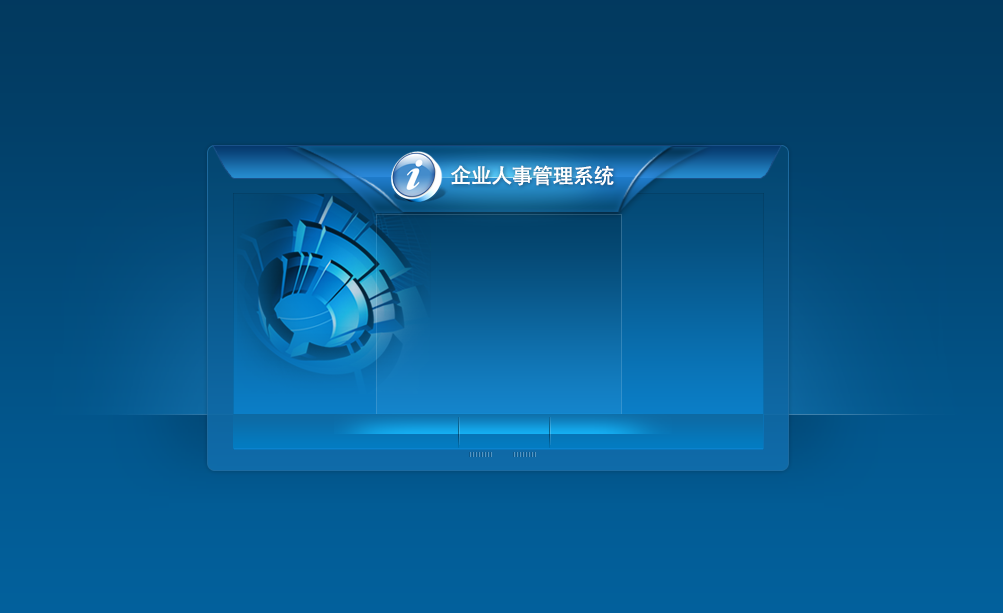
<style>
.page{position:relative;width:1003px;height:613px}
.page>*{position:absolute;margin:0}
.t1{font:21px "AdobeHeitiStd-Regular";letter-spacing:-0.025em;color:#ffffff}
</style>
<div class="page">
<p class="t1" style="left:451px;top:165px;width:163px;height:21px">企业人事管理系统</p>
</div>
